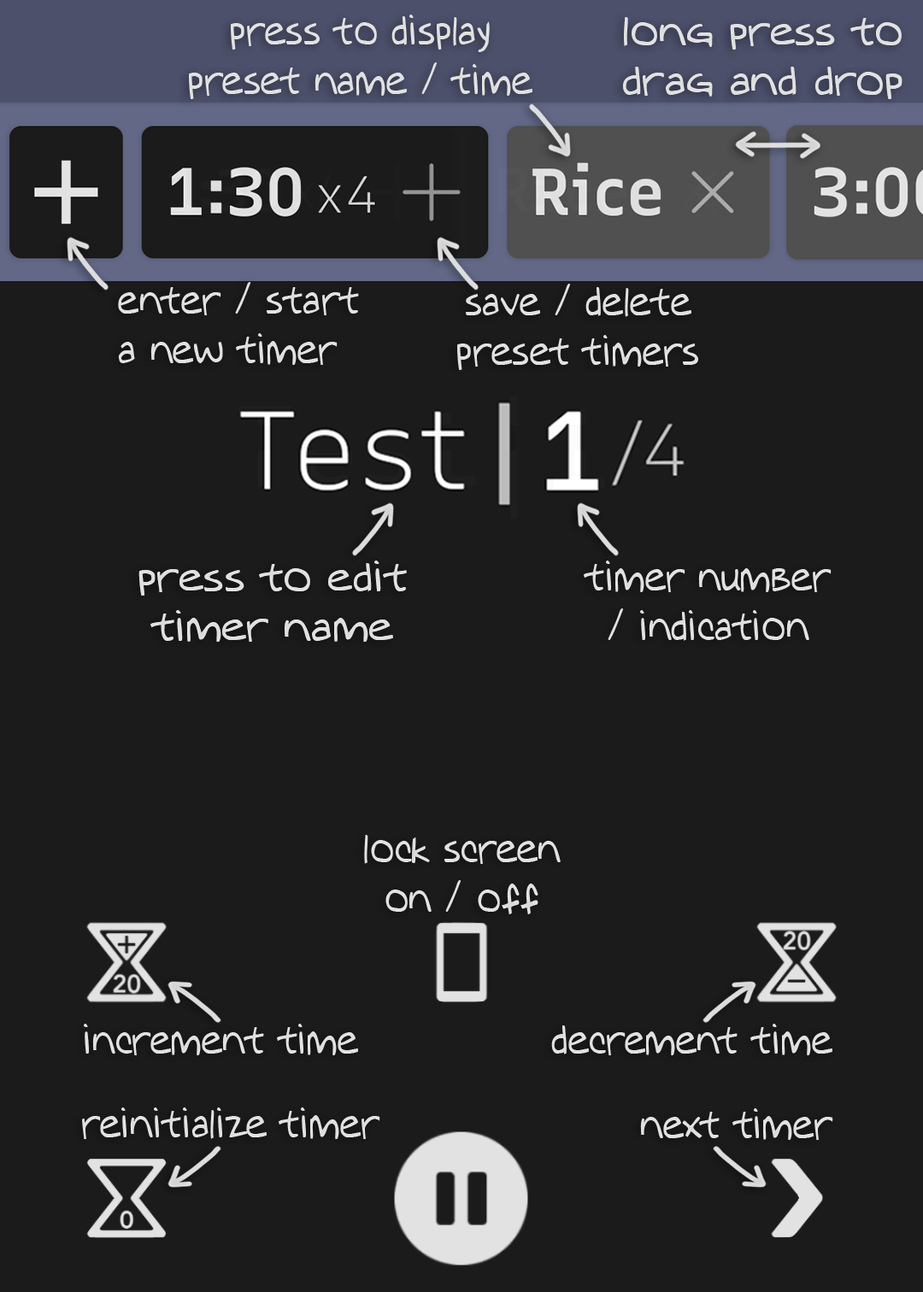
<style>
.page{position:relative;width:923px;height:1292px;background:#1b1b1b}
.page>*{position:absolute;margin:0}
.t1{font:41px "Augie";color:#e2e2e2;scale:0.85 1}
.t2{font:41px "Augie";color:#e2e2e2}
.t3{font:41px "Augie";color:#e1e1e1}
</style>
<div class="page">
<p class="t1" style="left:189px;top:15px;width:343px;height:84px;text-align:center">press to display<br>preset name / time</p>
<p class="t2" style="left:623px;top:17px;width:279px;height:82px;text-align:center">long press to<br>drag and drop</p>
<p class="t1" style="left:118px;top:282px;width:241px;height:83px">enter / start<br>a new timer</p>
<p class="t1" style="left:457px;top:284px;width:241px;height:86px;text-align:center">save / delete<br>preset timers</p>
<p class="t3" style="left:138px;top:561px;width:269px;height:81px;text-align:center">press to edit<br>timer name</p>
<p class="t1" style="left:583px;top:561px;width:248px;height:80px;text-align:center">timer number<br>/ indication</p>
<p class="t1" style="left:364px;top:835px;width:197px;height:79px;text-align:center">lock screen<br>on / off</p>
<p class="t1" style="left:84px;top:1024px;width:274px;height:31px">increment time</p>
<p class="t1" style="left:551px;top:1024px;width:281px;height:31px">decrement time</p>
<p class="t1" style="left:82px;top:1107px;width:298px;height:32px">reinitialize timer</p>
<p class="t1" style="left:640px;top:1108px;width:193px;height:32px">next timer</p>
</div>
